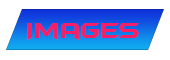
<style>
.page{position:relative;width:170px;height:60px;background:#ffffff}
.page>*{position:absolute;margin:0}
.t1{font:25px "BatmanForeverAlternate";color:#f61e67}
</style>
<div class="page">
<p class="t1" style="left:27px;top:23px;width:112px;height:17px">Images</p>
</div>
